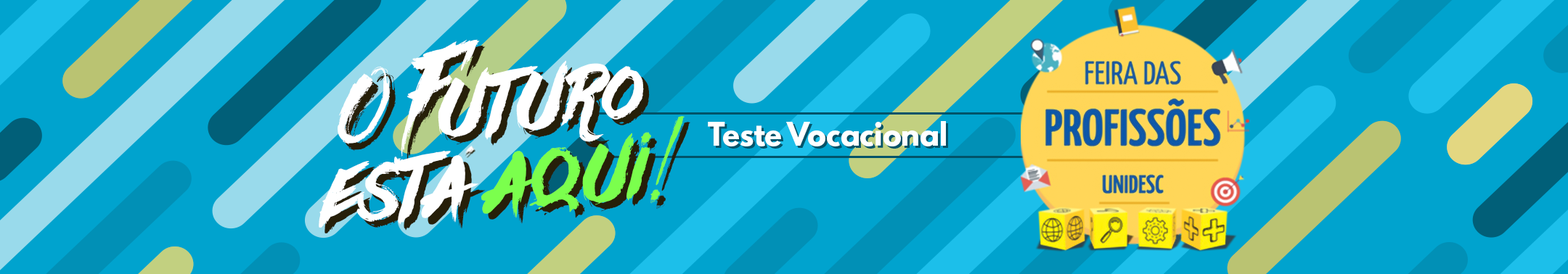
<style>
.page{position:relative;width:1568px;height:274px;background:#00a3ce}
.page>*{position:absolute;margin:0}
.t1{font:106.7px/78px "Againts";color:#ffffff}
.t2{font:106.7px/78px "Againts";color:#7bff4d}
.t3{font:106.7px/78px "Againts"}
.t4{font:28.7px "LeagueSpartan-Bold";color:#ffffff}
</style>
<div class="page">
<p class="t1" style="left:319px;top:39px;width:366px;height:189px;text-align:center;rotate:-5deg">O Futuro<br>esta <span class="t2">aqui!</span></p>
<p class="t3" style="left:324px;top:45px;width:366px;height:189px;text-align:center;rotate:-5deg">O Futuro<br>esta aqui!</p>
<p class="t4" style="left:708px;top:121px;width:238px;height:26px">Teste Vocacional</p>
</div>
